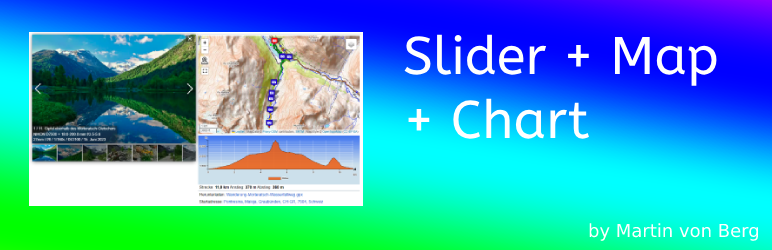
<style>
.page{position:relative;width:772px;height:250px}
.page>*{position:absolute;margin:0}
.t1{font:53px "ABeeZee-Regular";color:#ffffff}
.t2{font:18px "DejaVuSans";color:#ffffff}
</style>
<div class="page">
<p class="t1" style="left:404px;top:34px;width:313px;height:105px">Slider + Map<br>+ Chart</p>
<p class="t2" style="left:589px;top:223px;width:170px;height:18px">by Martin von Berg</p>
</div>
